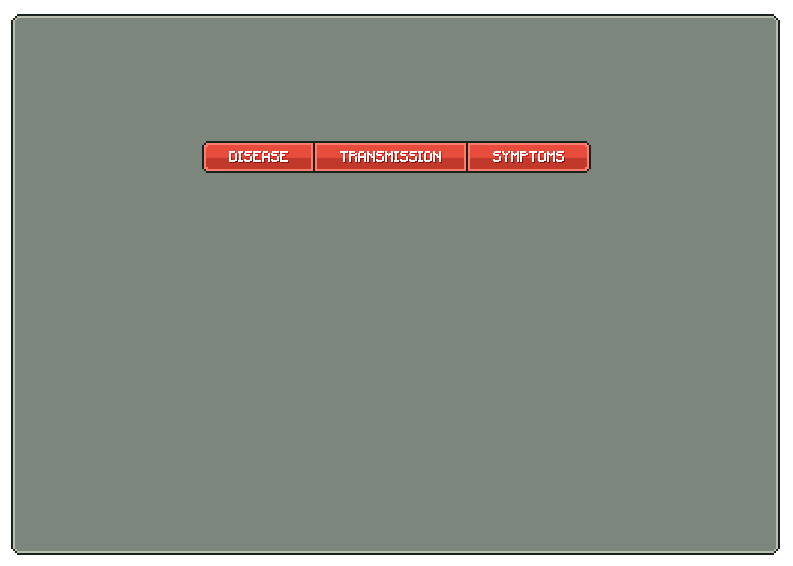
<style>
.page{position:relative;width:793px;height:566px;background:#7d867d}
.page>*{position:absolute;margin:0}
.t1{font:12px "Minecraftia";color:#fefefe;text-transform:uppercase}
</style>
<div class="page">
<p class="t1" style="left:229px;top:151px;width:59px;height:11px">Disease</p>
<p class="t1" style="left:340px;top:151px;width:101px;height:11px">Transmission</p>
<p class="t1" style="left:493px;top:151px;width:71px;height:11px">Symptoms</p>
</div>
